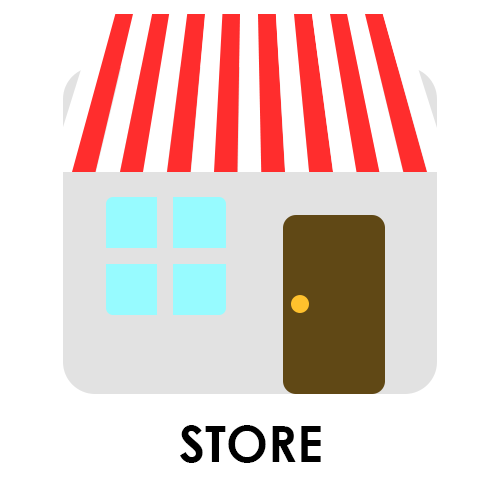
<style>
.page{position:relative;width:500px;height:500px;background:#ffffff}
.page>*{position:absolute;margin:0}
.t1{font:50px "CenturyGothic-Bold";color:#000000}
</style>
<div class="page">
<p class="t1" style="left:180px;top:425px;width:141px;height:38px">STORE</p>
</div>
